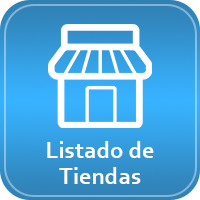
<style>
.page{position:relative;width:200px;height:200px}
.page>*{position:absolute;margin:0}
.t1{font:24.3px/26.2px "Corbel-Bold";color:#ffffff}
</style>
<div class="page">
<p class="t1" style="left:47px;top:141px;width:107px;height:43px;text-align:center">Listado de<br>Tiendas</p>
</div>
